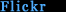
<style>
.page{position:relative;width:66px;height:12px;background:#000000}
.page>*{position:absolute;margin:0}
.t1{font:14px "Georgia";letter-spacing:0.1em;color:#4eabfa;font-weight:bold}
</style>
<div class="page">
<p class="t1" style="left:0px;top:0px;width:46px;height:12px">Flickr</p>
</div>
